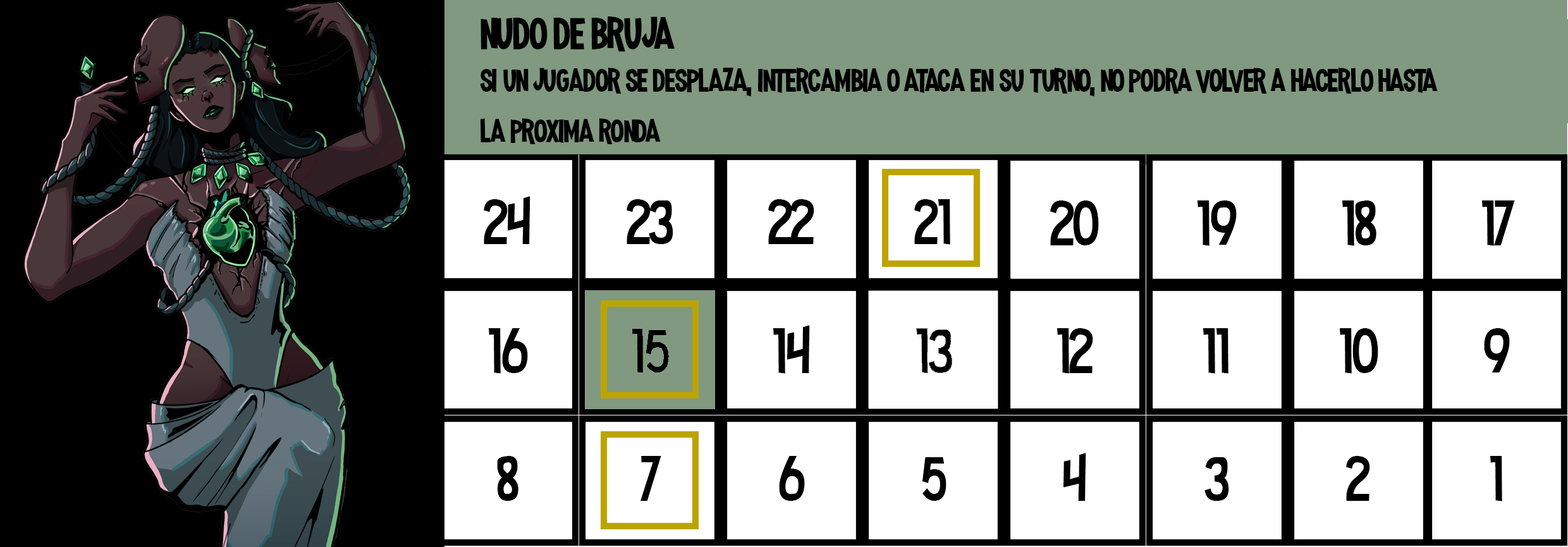
<style>
.page{position:relative;width:1568px;height:547px;background:#ffffff}
.page>*{position:absolute;margin:0}
.t1{font:58.3px "MadnessHyperactive";color:#000000}
.t2{font:42.2px "MadnessHyperactive";color:#000000}
</style>
<div class="page">
<p class="t1" style="left:481px;top:16px;width:194px;height:36px">nudo de bruja</p>
<p class="t2" style="left:480px;top:68px;width:958px;height:76px">si un jugador se desplaza, intercambia o ataca en su turno, no podra volver a hacerlo hasta <br>la proxima ronda</p>
</div>
